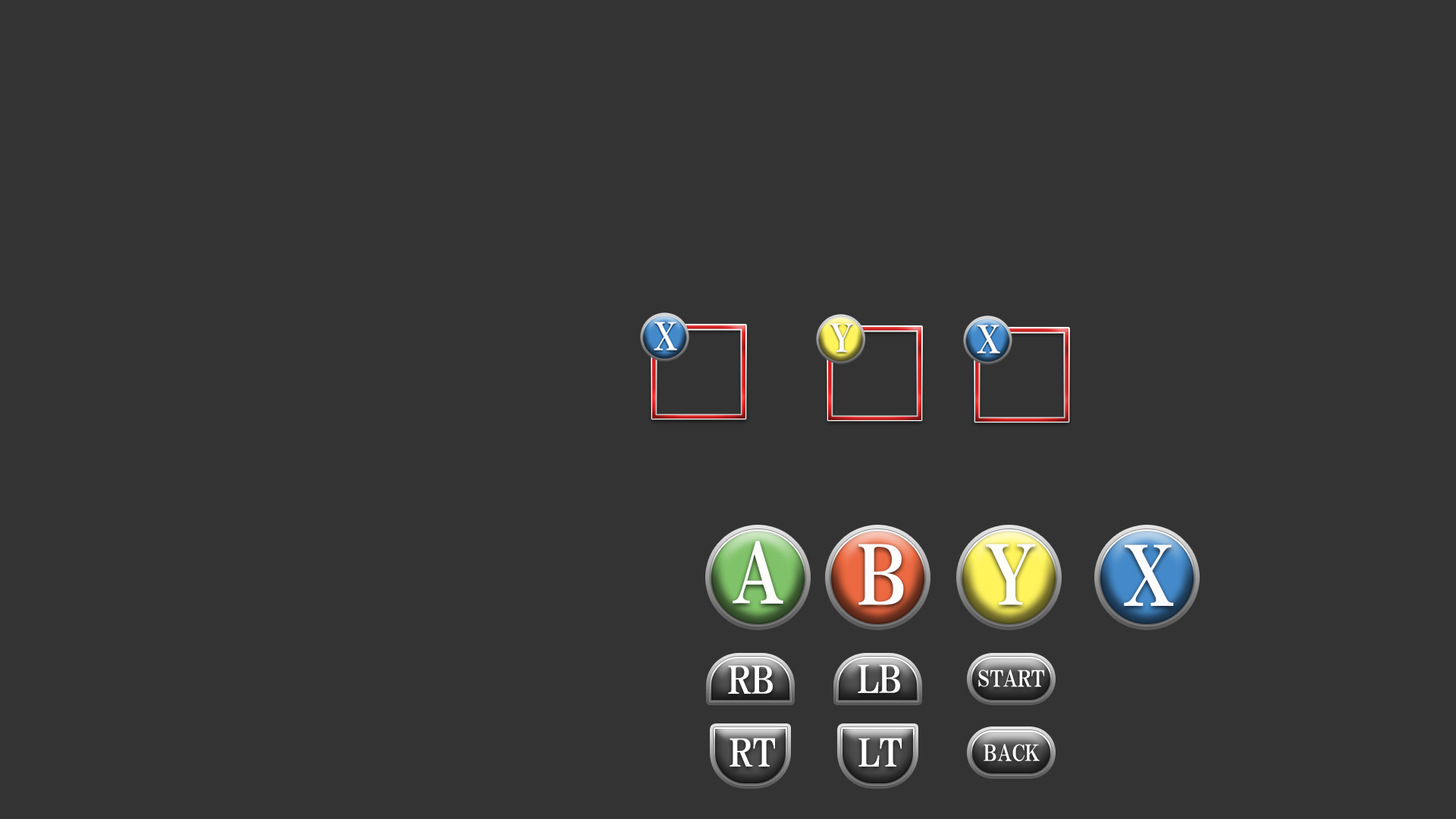
<style>
.page{position:relative;width:1456px;height:819px;background:#333333}
.page>*{position:absolute;margin:0}
.t1{font:82.2px "HGPMinchoE";color:#ffffff}
.t2{font:37.9px "HGPMinchoE";color:#ffffff}
.t3{font:22.1px "HGPMinchoE";color:#ffffff}
</style>
<div class="page">
<p class="t1" style="left:733px;top:541px;width:50px;height:63px">A</p>
<p class="t1" style="left:858px;top:544px;width:46px;height:61px">B</p>
<p class="t1" style="left:986px;top:544px;width:50px;height:61px">Y</p>
<p class="t1" style="left:1124px;top:544px;width:50px;height:62px">X</p>
<p class="t2" style="left:728px;top:665px;width:45px;height:29px">RB</p>
<p class="t2" style="left:858px;top:664px;width:42px;height:29px">LB</p>
<p class="t3" style="left:978px;top:670px;width:66px;height:17px">START</p>
<p class="t2" style="left:730px;top:738px;width:45px;height:29px">RT</p>
<p class="t2" style="left:858px;top:738px;width:44px;height:29px">LT</p>
<p class="t3" style="left:984px;top:744px;width:56px;height:17px">BACK</p>
</div>
